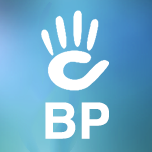
<style>
.page{position:relative;width:152px;height:152px}
.page>*{position:absolute;margin:0}
.t1{font:50px "Helvetica-Bold";color:#ffffff}
</style>
<div class="page">
<p class="t1" style="left:45px;top:102px;width:64px;height:37px">BP</p>
</div>
